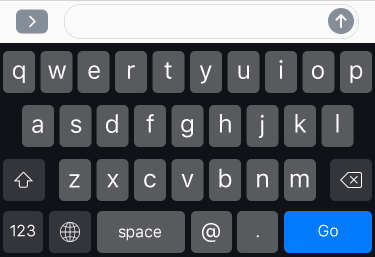
<style>
.page{position:relative;width:375px;height:257px;background:#585a5d}
.page>*{position:absolute;margin:0}
.t1{font:25px "SFUIText-Regular";color:#ffffff}
.t2{font:16px "SFUIText-Regular";letter-spacing:-0.02em;color:#ffffff}
.t3{font:23px "SFUIText-Regular";letter-spacing:-0.02em;color:#ffffff}
</style>
<div class="page">
<p class="t1" style="left:13px;top:65px;width:12px;height:18px">q</p>
<p class="t1" style="left:48px;top:65px;width:18px;height:14px">w</p>
<p class="t1" style="left:88px;top:65px;width:12px;height:14px">e</p>
<p class="t1" style="left:128px;top:65px;width:7px;height:14px">r</p>
<p class="t1" style="left:164px;top:62px;width:8px;height:17px">t</p>
<p class="t1" style="left:199px;top:65px;width:13px;height:19px">y</p>
<p class="t1" style="left:238px;top:65px;width:11px;height:14px">u</p>
<p class="t1" style="left:279px;top:60px;width:4px;height:19px">i</p>
<p class="t1" style="left:312px;top:65px;width:12px;height:14px">o</p>
<p class="t1" style="left:350px;top:65px;width:13px;height:18px">p</p>
<p class="t1" style="left:32px;top:119px;width:11px;height:14px">a</p>
<p class="t1" style="left:71px;top:119px;width:11px;height:14px">s</p>
<p class="t1" style="left:106px;top:114px;width:12px;height:19px">d</p>
<p class="t1" style="left:146px;top:114px;width:8px;height:19px">f</p>
<p class="t1" style="left:181px;top:119px;width:12px;height:19px">g</p>
<p class="t1" style="left:220px;top:114px;width:11px;height:19px">h</p>
<p class="t1" style="left:259px;top:114px;width:5px;height:24px">j</p>
<p class="t1" style="left:295px;top:114px;width:12px;height:19px">k</p>
<p class="t1" style="left:336px;top:114px;width:3px;height:19px">l</p>
<p class="t1" style="left:69px;top:174px;width:11px;height:14px">z</p>
<p class="t1" style="left:107px;top:174px;width:12px;height:14px">x</p>
<p class="t1" style="left:144px;top:173px;width:12px;height:15px">c</p>
<p class="t1" style="left:181px;top:174px;width:13px;height:14px">v</p>
<p class="t1" style="left:219px;top:168px;width:13px;height:20px">b</p>
<p class="t1" style="left:257px;top:173px;width:11px;height:15px">n</p>
<p class="t1" style="left:290px;top:173px;width:19px;height:15px">m</p>
<p class="t2" style="left:10px;top:224px;width:25px;height:13px">123</p>
<p class="t2" style="left:118px;top:228px;width:43px;height:13px">space</p>
<p class="t3" style="left:202px;top:223px;width:18px;height:19px">@</p>
<p class="t2" style="left:318px;top:224px;width:20px;height:13px">Go</p>
<p class="t2" style="left:256px;top:235px;width:3px;height:3px">.</p>
</div>
